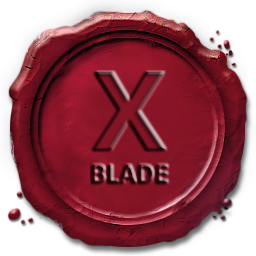
<style>
.page{position:relative;width:256px;height:256px}
.page>*{position:absolute;margin:0}
.t1{font:24.9px/32.8px "OpenSans-Bold";letter-spacing:-0.02em;text-transform:uppercase}
.t2{font:108.9px/32.8px "OpenSans-Bold";letter-spacing:-0.02em;text-transform:uppercase}
</style>
<div class="page">
<p class="t1" style="left:92px;top:72px;width:75px;height:111px;text-align:center"><span class="t2">X<br></span>blade</p>
</div>
